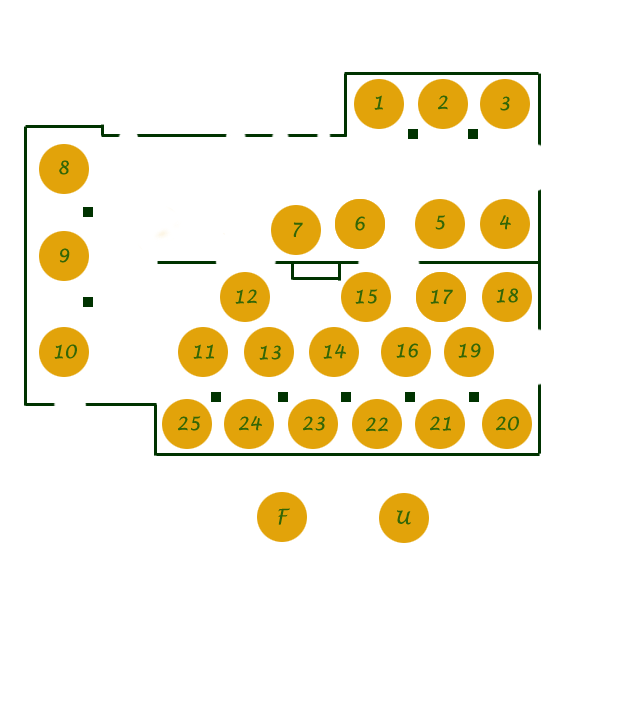
<style>
.page{position:relative;width:640px;height:726px;background:#ffffff}
.page>*{position:absolute;margin:0}
.t1{font:18px "LucidaHandwriting-Italic";color:#336606}
</style>
<div class="page">
<p class="t1" style="left:374px;top:95px;width:9px;height:15px">1</p>
<p class="t1" style="left:438px;top:95px;width:10px;height:15px">2</p>
<p class="t1" style="left:500px;top:96px;width:10px;height:15px">3</p>
<p class="t1" style="left:59px;top:160px;width:10px;height:15px">8</p>
<p class="t1" style="left:293px;top:222px;width:10px;height:15px">7</p>
<p class="t1" style="left:355px;top:216px;width:10px;height:15px">6</p>
<p class="t1" style="left:435px;top:215px;width:10px;height:15px">5</p>
<p class="t1" style="left:500px;top:215px;width:11px;height:15px">4</p>
<p class="t1" style="left:59px;top:248px;width:11px;height:15px">9</p>
<p class="t1" style="left:235px;top:289px;width:22px;height:15px">12</p>
<p class="t1" style="left:355px;top:289px;width:23px;height:15px">15</p>
<p class="t1" style="left:430px;top:289px;width:23px;height:15px">17</p>
<p class="t1" style="left:496px;top:288px;width:22px;height:15px">18</p>
<p class="t1" style="left:54px;top:344px;width:23px;height:15px">10</p>
<p class="t1" style="left:193px;top:344px;width:21px;height:15px">11</p>
<p class="t1" style="left:259px;top:345px;width:22px;height:15px">13</p>
<p class="t1" style="left:323px;top:344px;width:23px;height:15px">14</p>
<p class="t1" style="left:396px;top:343px;width:22px;height:15px">16</p>
<p class="t1" style="left:458px;top:343px;width:23px;height:15px">19</p>
<p class="t1" style="left:178px;top:416px;width:23px;height:15px">25</p>
<p class="t1" style="left:239px;top:416px;width:23px;height:15px">24</p>
<p class="t1" style="left:303px;top:416px;width:22px;height:15px">23</p>
<p class="t1" style="left:366px;top:417px;width:22px;height:15px">22</p>
<p class="t1" style="left:430px;top:416px;width:21px;height:15px">21</p>
<p class="t1" style="left:496px;top:416px;width:23px;height:15px">20</p>
<p class="t1" style="left:278px;top:508px;width:12px;height:17px">F</p>
<p class="t1" style="left:397px;top:510px;width:14px;height:15px">U</p>
</div>
